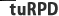
<style>
.page{position:relative;width:59px;height:16px;background:#ffffff}
.page>*{position:absolute;margin:0}
.t1{font:16px "AdobeGothicStd-Bold";color:#303030;font-weight:bold}
</style>
<div class="page">
<p class="t1" style="left:9px;top:2px;width:49px;height:14px">tuRPD</p>
</div>
